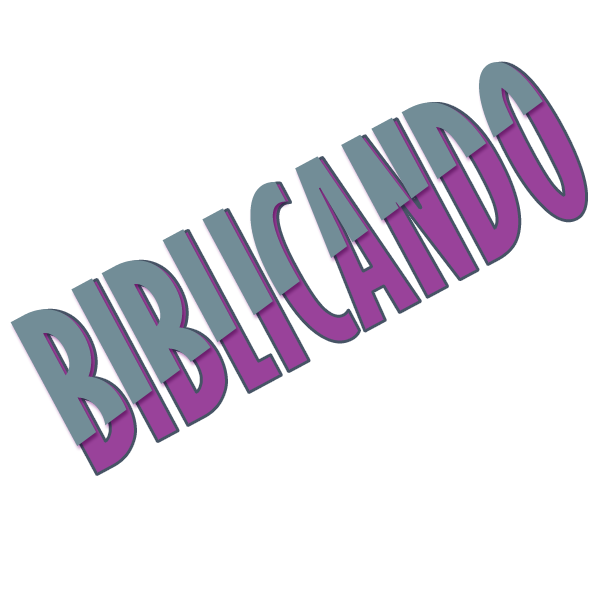
<style>
.page{position:relative;width:600px;height:600px;background:#ffffff}
.page>*{position:absolute;margin:0}
.t1{font:215.4px "GillSansMT-ExtraCondensedBold"}
</style>
<div class="page">
<p class="t1" style="left:15px;top:63px;width:572px;height:412px;rotate:-28deg">BIBLICANDO</p>
</div>
